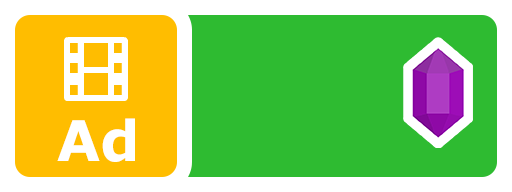
<style>
.page{position:relative;width:512px;height:192px;background:#2ebb31}
.page>*{position:absolute;margin:0}
.t1{font:56px "Verdana-Bold";color:#ffffff}
</style>
<div class="page">
<p class="t1" style="left:57px;top:118px;width:78px;height:44px">Ad</p>
</div>
